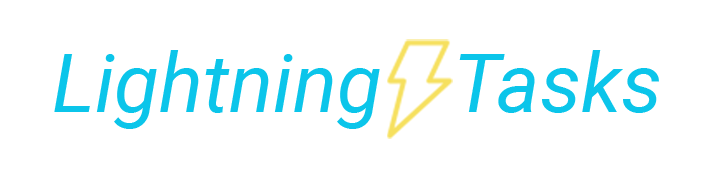
<style>
.page{position:relative;width:712px;height:178px;background:#ffffff}
.page>*{position:absolute;margin:0}
.t1{font:81.6px "Roboto-Italic";color:#0bc5ea}
</style>
<div class="page">
<p class="t1" style="left:54px;top:50px;width:326px;height:79px">Lightning</p>
<p class="t1" style="left:459px;top:50px;width:200px;height:63px">Tasks</p>
</div>
